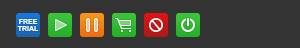
<style>
.page{position:relative;width:300px;height:48px;background:#333333}
.page>*{position:absolute;margin:0}
.t1{font:7px/7px "Arial-BoldMT";color:#ffffff}
</style>
<div class="page">
<p class="t1" style="left:17px;top:19px;width:22px;height:12px;text-align:center">FREE<br>TRIAL</p>
</div>
